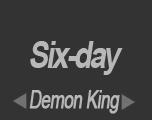
<style>
.page{position:relative;width:152px;height:120px;background:#333333}
.page>*{position:absolute;margin:0}
.t1{font:37.3px "Arial-BoldMT";letter-spacing:-0.08em;color:#b8b8b8;font-style:italic;scale:0.8 1}
.t2{font:25px "ArialMT";letter-spacing:-0.05em;color:#b8b8b8;font-weight:bold;font-style:italic;scale:0.68 1}
</style>
<div class="page">
<p class="t1" style="left:30px;top:41px;width:93px;height:34px">Six-day</p>
<p class="t2" style="left:29px;top:90px;width:91px;height:24px">Demon King</p>
</div>
